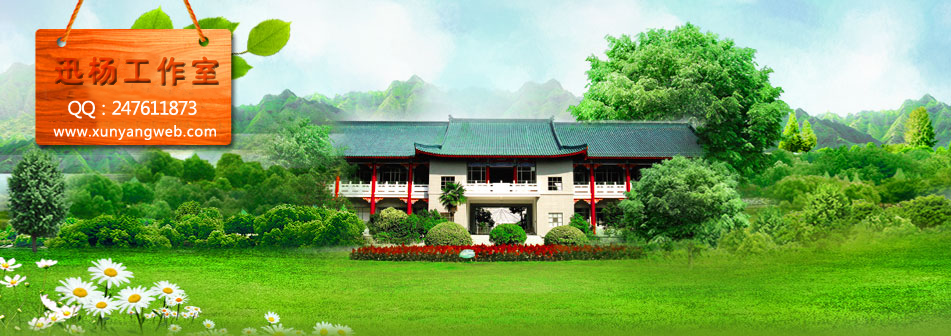
<style>
.page{position:relative;width:951px;height:336px}
.page>*{position:absolute;margin:0}
.t1{font:30px "HYe4gj";letter-spacing:0.14em}
.t2{font:18px "MicrosoftYaHei";letter-spacing:-0.06em;color:#fdfbf9}
.t3{font:14px "MicrosoftYaHei";letter-spacing:0.04em;color:#fdfbf9}
</style>
<div class="page">
<p class="t1" style="left:54px;top:56px;width:165px;height:29px">迅杨工作室</p>
<p class="t2" style="left:68px;top:100px;width:129px;height:19px">QQ：247611873</p>
<p class="t3" style="left:53px;top:125px;width:163px;height:15px">www.xunyangweb.com</p>
</div>
